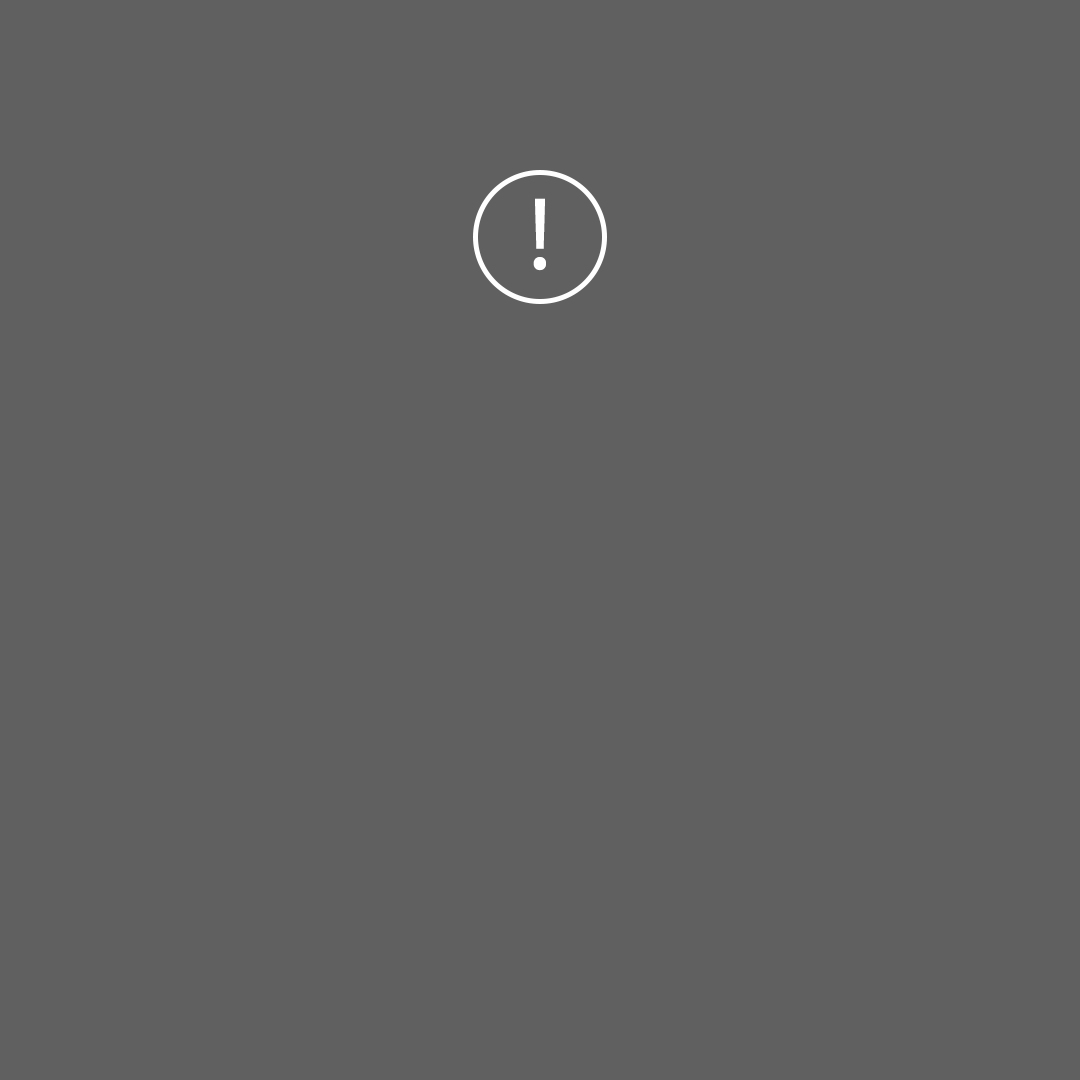
<style>
.page{position:relative;width:1080px;height:1080px;background:#606060}
.page>*{position:absolute;margin:0}
.t1{font:104.2px "MyriadPro-Regular";letter-spacing:0.05em;color:#ffffff;text-transform:uppercase}
</style>
<div class="page">
<p class="t1" style="left:533px;top:198px;width:13px;height:73px">!</p>
</div>
